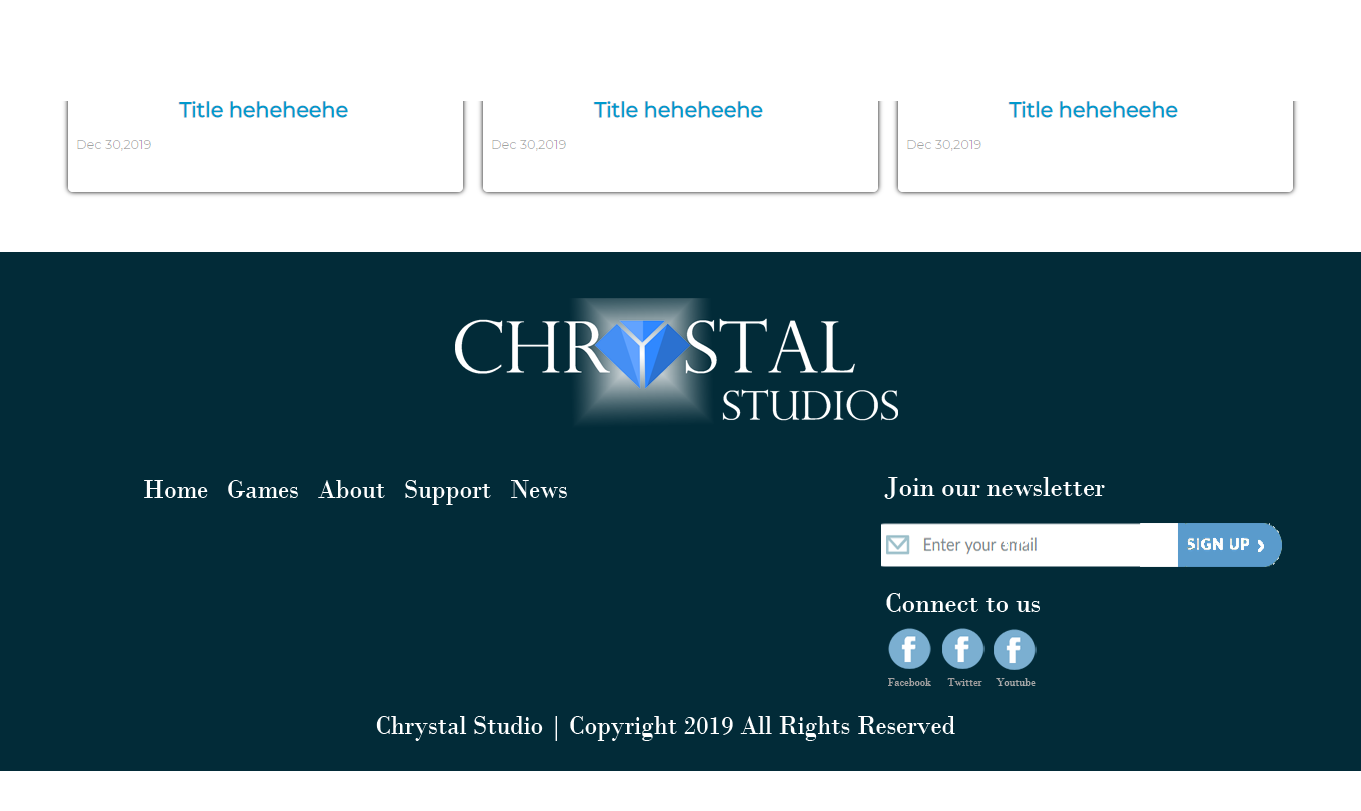
<style>
.page{position:relative;width:1361px;height:811px;background:#022b38}
.page>*{position:absolute;margin:0}
.t1{font:26.8px "BodoniMT";color:#ffffff;scale:0.95 1}
.t2{font:29.3px "BodoniMT";color:#ffffff;scale:0.94 1}
.t3{font:10.7px "BodoniMT";color:#a29f9f}
.t4{font:10.7px "BodoniMT";color:#a8a8a8}
</style>
<div class="page">
<p class="t1" style="left:144px;top:480px;width:423px;height:25px">Home   Games   About   Support   News</p>
<p class="t2" style="left:884px;top:477px;width:221px;height:22px">Join our newsletter</p>
<p class="t2" style="left:886px;top:593px;width:154px;height:19px">Connect to us</p>
<p class="t3" style="left:888px;top:678px;width:43px;height:8px">Facebook</p>
<p class="t3" style="left:947px;top:678px;width:35px;height:8px">Twitter</p>
<p class="t4" style="left:996px;top:678px;width:40px;height:8px">Youtube</p>
<p class="t1" style="left:376px;top:716px;width:579px;height:25px">Chrystal Studio | Copyright 2019 All Rights Reserved</p>
</div>
